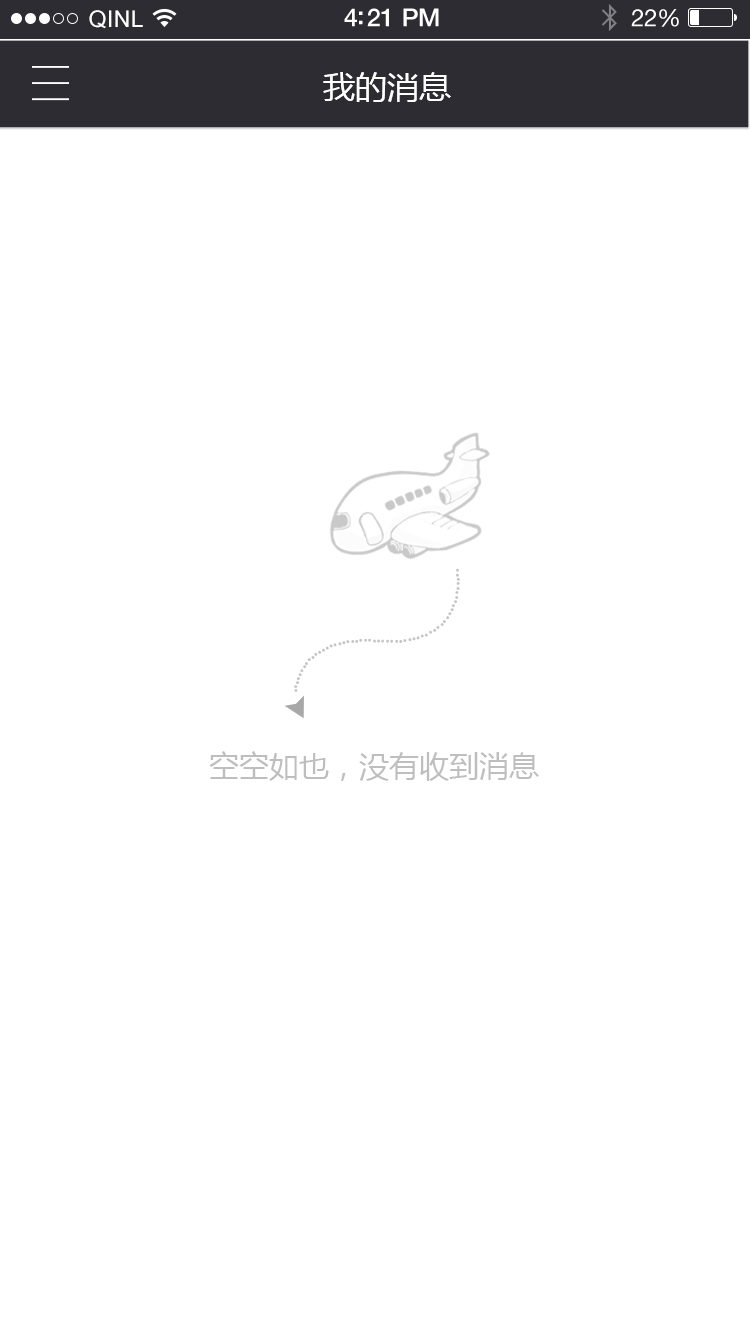
<style>
.page{position:relative;width:750px;height:1334px;background:#ffffff}
.page>*{position:absolute;margin:0}
.t1{font:23px "ArialUnicodeMS";letter-spacing:0.02em;color:#ffffff}
.t2{font:25px "HelveticaNeue-Medium";letter-spacing:-0.02em;color:#ffffff}
.t3{font:24px "HelveticaNeue";letter-spacing:-0.02em;color:#ffffff}
.t4{font:32px "MicrosoftYaHei";color:#ffffff}
.t5{font:18px/34px "AdobeHeitiStd-Regular";color:#c4c4c4}
.t6{font:30px "MicrosoftYaHei";color:#bebebe}
</style>
<div class="page">
<p class="t1" style="left:89px;top:10px;width:54px;height:19px">QINL</p>
<p class="t2" style="left:344px;top:8px;width:95px;height:19px">4:21 PM</p>
<p class="t3" style="left:631px;top:9px;width:48px;height:18px">22%</p>
<p class="t4" style="left:323px;top:72px;width:128px;height:30px">我的消息</p>
<p class="t5" style="left:294px;top:568px;width:166px;height:124px;text-align:center">..................................................................</p>
<p class="t6" style="left:209px;top:751px;width:330px;height:30px">空空如也，没有收到消息</p>
</div>
